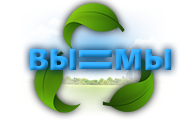
<style>
.page{position:relative;width:195px;height:120px;background:#ffffff}
.page>*{position:absolute;margin:0}
.t1{font:30px "SegoeUIBlack"}
</style>
<div class="page">
<p class="t1" style="left:30px;top:49px;width:47px;height:21px">ВЫ</p>
<p class="t1" style="left:115px;top:49px;width:57px;height:21px">МЫ</p>
</div>
